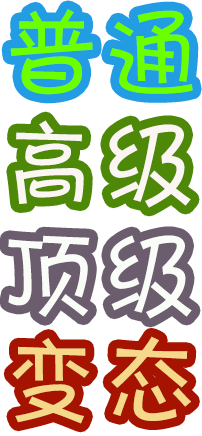
<style>
.page{position:relative;width:202px;height:436px;background:#ffffff}
.page>*{position:absolute;margin:0}
.t1{font:100px "FZKATJW--GB1-0";color:#6cff00}
.t2{font:100px "FZKATJW--GB1-0";color:#fcf6f3}
.t3{font:100px "FZKATJW--GB1-0";color:#fafcf8}
.t4{font:100px "FZKATJW--GB1-0";color:#f5d889}
</style>
<div class="page">
<p class="t1" style="left:10px;top:9px;width:183px;height:86px">普通</p>
<p class="t2" style="left:15px;top:120px;width:176px;height:88px">高级</p>
<p class="t3" style="left:8px;top:235px;width:184px;height:84px">顶级</p>
<p class="t4" style="left:12px;top:336px;width:179px;height:88px">变态</p>
</div>
